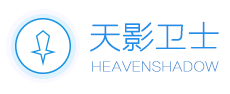
<style>
.page{position:relative;width:230px;height:94px;background:#ffffff}
.page>*{position:absolute;margin:0}
.t1{font:32px "FZLTCXHJW--GB1-0";color:#218fe8;font-weight:bold}
.t2{font:13.3px "FZLTCXHJW--GB1-0";color:#3987d5;font-weight:bold}
</style>
<div class="page">
<p class="t1" style="left:90px;top:21px;width:129px;height:31px">天影卫士</p>
<p class="t2" style="left:92px;top:61px;width:127px;height:11px">HEAVENSHADOW</p>
</div>
